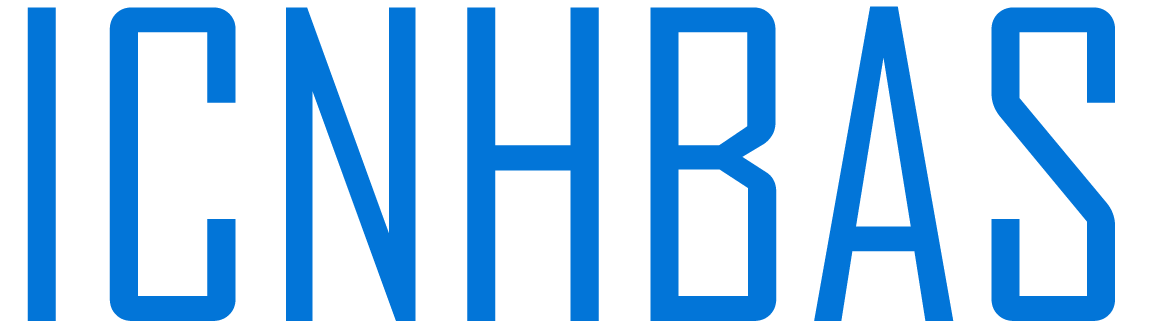
<style>
.page{position:relative;width:1152px;height:324px;background:#ffffff}
.page>*{position:absolute;margin:0}
.t1{font:410px "AgencyFB-Reg";letter-spacing:0.005em;color:#0275d8}
</style>
<div class="page">
<p class="t1" style="left:27px;top:6px;width:1088px;height:315px">ICNHBAS</p>
</div>
